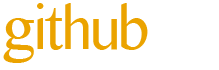
<style>
.page{position:relative;width:219px;height:70px;background:#ffffff}
.page>*{position:absolute;margin:0}
.t1{font:57.8px "GurmukhiMN";letter-spacing:-0.025em;color:#eba400;scale:0.91 1}
</style>
<div class="page">
<p class="t1" style="left:3px;top:3px;width:145px;height:60px">github</p>
</div>
